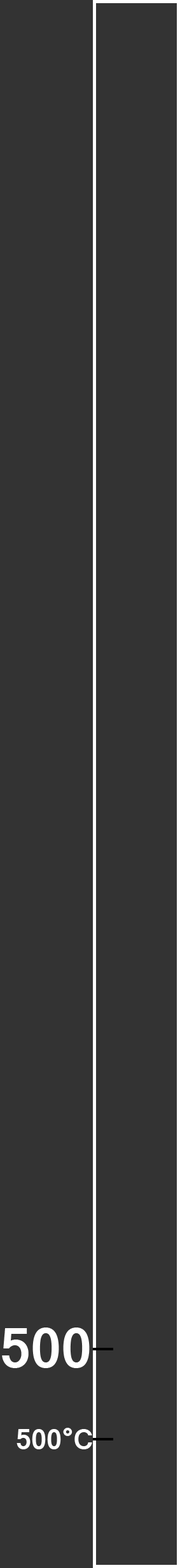
<style>
.page{position:relative;width:180px;height:1568px;background:#333333}
.page>*{position:absolute;margin:0}
.t1{font:60.9px "Latha-Bold";color:#ffffff}
.t2{font:30.5px "Latha-Bold";color:#ffffff}
</style>
<div class="page">
<p class="t1" style="left:2px;top:1328px;width:87px;height:40px">500</p>
<p class="t2" style="left:16px;top:1428px;width:76px;height:21px">500°C</p>
</div>
